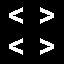
<style>
.page{position:relative;width:64px;height:64px;background:#000000}
.page>*{position:absolute;margin:0}
.t1{font:30px "Gotham-Bold";letter-spacing:0.2em;color:#ffffff}
</style>
<div class="page">
<p class="t1" style="left:9px;top:7px;width:14px;height:17px;rotate:180deg">&gt;</p>
<p class="t1" style="left:40px;top:7px;width:14px;height:17px">&gt;</p>
<p class="t1" style="left:9px;top:38px;width:14px;height:17px;rotate:180deg">&gt;</p>
<p class="t1" style="left:40px;top:38px;width:14px;height:17px">&gt;</p>
</div>
